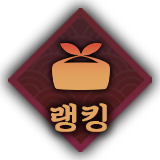
<style>
.page{position:relative;width:160px;height:160px;background:#ffffff}
.page>*{position:absolute;margin:0}
.t1{font:31.5px "SDKukdetopokki-aLt";letter-spacing:0.02em;color:#e2a561;font-weight:bold}
</style>
<div class="page">
<p class="t1" style="left:50px;top:103px;width:57px;height:29px">랭킹</p>
</div>
